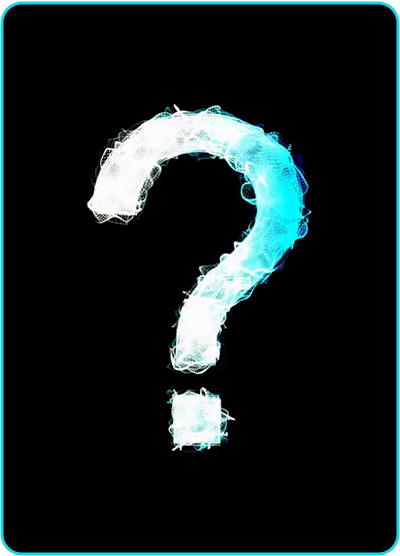
<style>
.page{position:relative;width:400px;height:556px;background:#000000}
.page>*{position:absolute;margin:0}
.t1{font:435.5px "Century"}
</style>
<div class="page">
<p class="t1" style="left:129px;top:129px;width:161px;height:328px">?</p>
</div>
